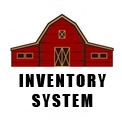
<style>
.page{position:relative;width:122px;height:122px;background:#ffffff}
.page>*{position:absolute;margin:0}
.t1{font:17px "Impact";letter-spacing:0.1em;color:#000000}
</style>
<div class="page">
<p class="t1" style="left:19px;top:74px;width:87px;height:33px;text-align:center">INVENTORY<br>SYSTEM</p>
</div>
